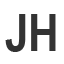
<style>
.page{position:relative;width:64px;height:64px;background:#ffffff}
.page>*{position:absolute;margin:0}
.t1{font:52px "ArialNarrow-Bold";color:#333333}
</style>
<div class="page">
<p class="t1" style="left:5px;top:14px;width:51px;height:38px">JH</p>
</div>
